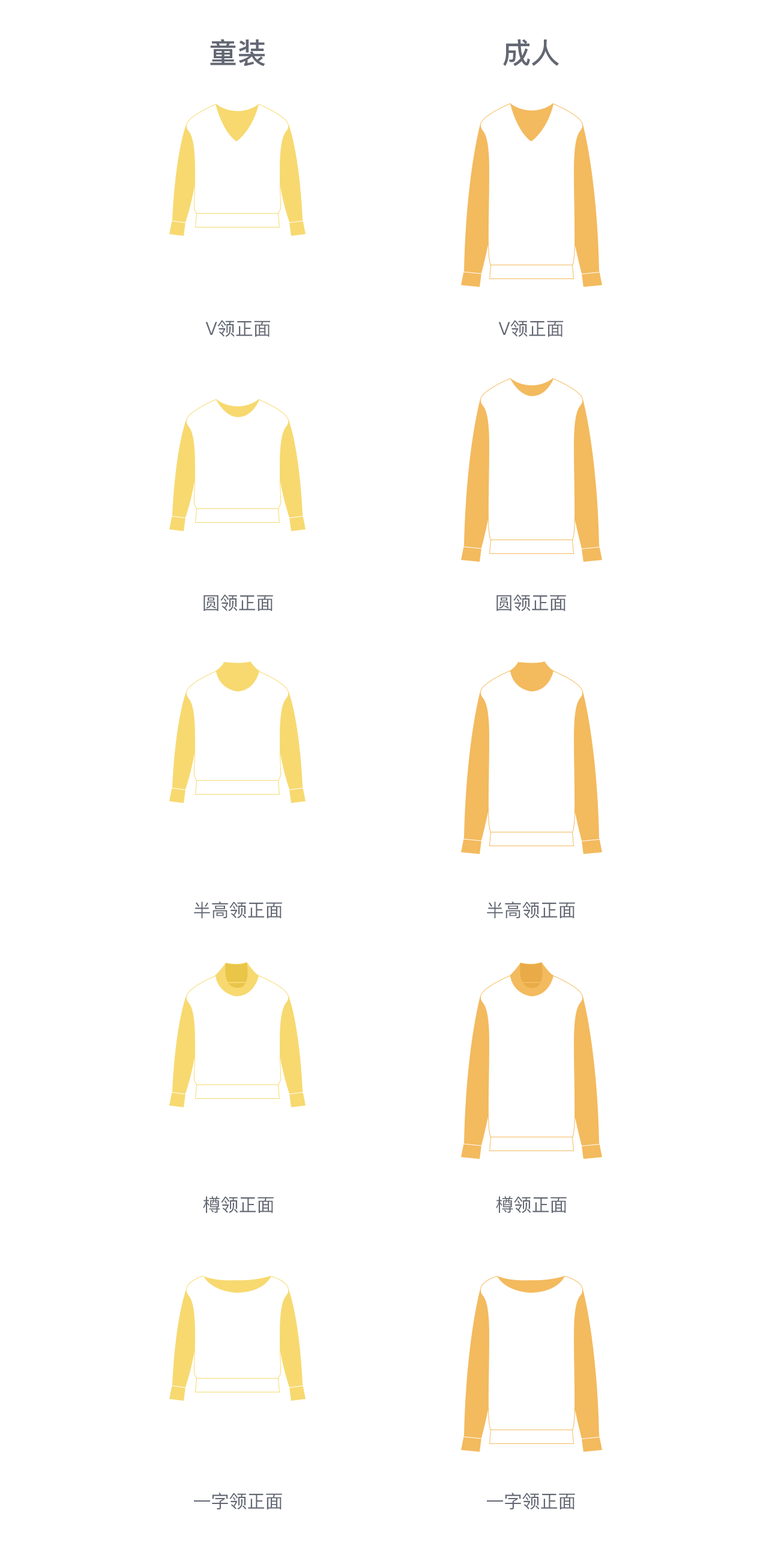
<style>
.page{position:relative;width:772px;height:1546px;background:#ffffff}
.page>*{position:absolute;margin:0}
.t1{font:28.8px "PingFang-SC-Bold";color:#626773}
.t2{font:18px "PingFang-SC-Medium";color:#626773}
</style>
<div class="page">
<p class="t1" style="left:210px;top:39px;width:55px;height:27px">童装</p>
<p class="t1" style="left:503px;top:39px;width:56px;height:27px">成人</p>
<p class="t2" style="left:205px;top:320px;width:65px;height:17px">V领正面</p>
<p class="t2" style="left:498px;top:320px;width:65px;height:17px">V领正面</p>
<p class="t2" style="left:203px;top:594px;width:70px;height:17px">圆领正面</p>
<p class="t2" style="left:496px;top:594px;width:70px;height:17px">圆领正面</p>
<p class="t2" style="left:194px;top:901px;width:88px;height:17px">半高领正面</p>
<p class="t2" style="left:487px;top:901px;width:88px;height:17px">半高领正面</p>
<p class="t2" style="left:203px;top:1196px;width:71px;height:17px">樽领正面</p>
<p class="t2" style="left:496px;top:1196px;width:70px;height:17px">樽领正面</p>
<p class="t2" style="left:194px;top:1492px;width:88px;height:17px">一字领正面</p>
<p class="t2" style="left:487px;top:1492px;width:88px;height:17px">一字领正面</p>
</div>
